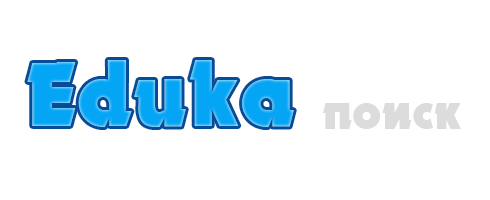
<style>
.page{position:relative;width:490px;height:200px;background:#ffffff}
.page>*{position:absolute;margin:0}
.t1{font:94px "Electron";letter-spacing:0.001em;color:#04a5f5}
.t2{font:52px "Electron";letter-spacing:0.001em;color:#dddcdc}
</style>
<div class="page">
<p class="t1" style="left:27px;top:60px;width:267px;height:67px">Eduka</p>
<p class="t2" style="left:323px;top:103px;width:138px;height:26px">поиск</p>
</div>
